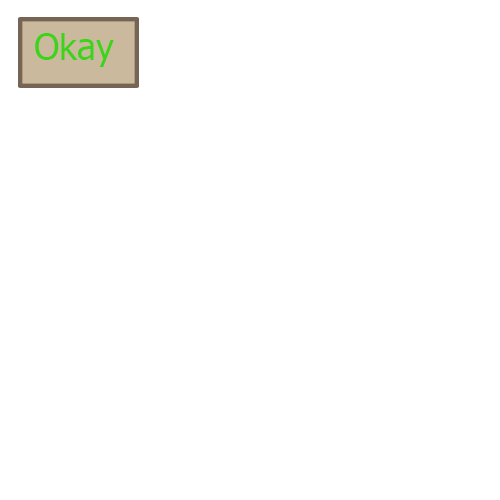
<style>
.page{position:relative;width:500px;height:500px;background:#ffffff}
.page>*{position:absolute;margin:0}
.t1{font:36px "Tahoma";color:#3dd31a}
</style>
<div class="page">
<p class="t1" style="left:35px;top:33px;width:79px;height:34px">Okay</p>
</div>
